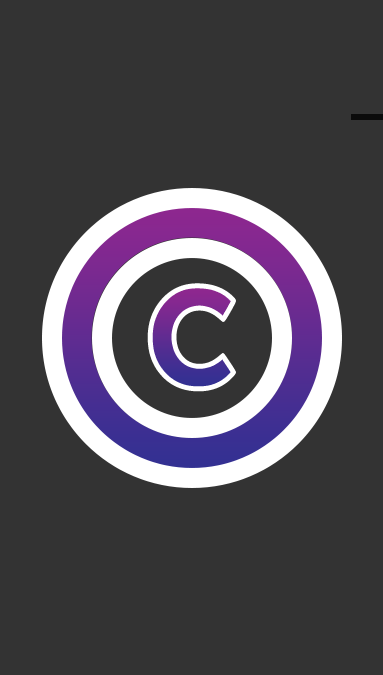
<style>
.page{position:relative;width:383px;height:675px;background:#333333}
.page>*{position:absolute;margin:0}
.t1{font:150px "BerlinSansFBDemi-Bold";letter-spacing:0.2em}
</style>
<div class="page">
<p class="t1" style="left:147px;top:283px;width:89px;height:109px">C</p>
</div>
